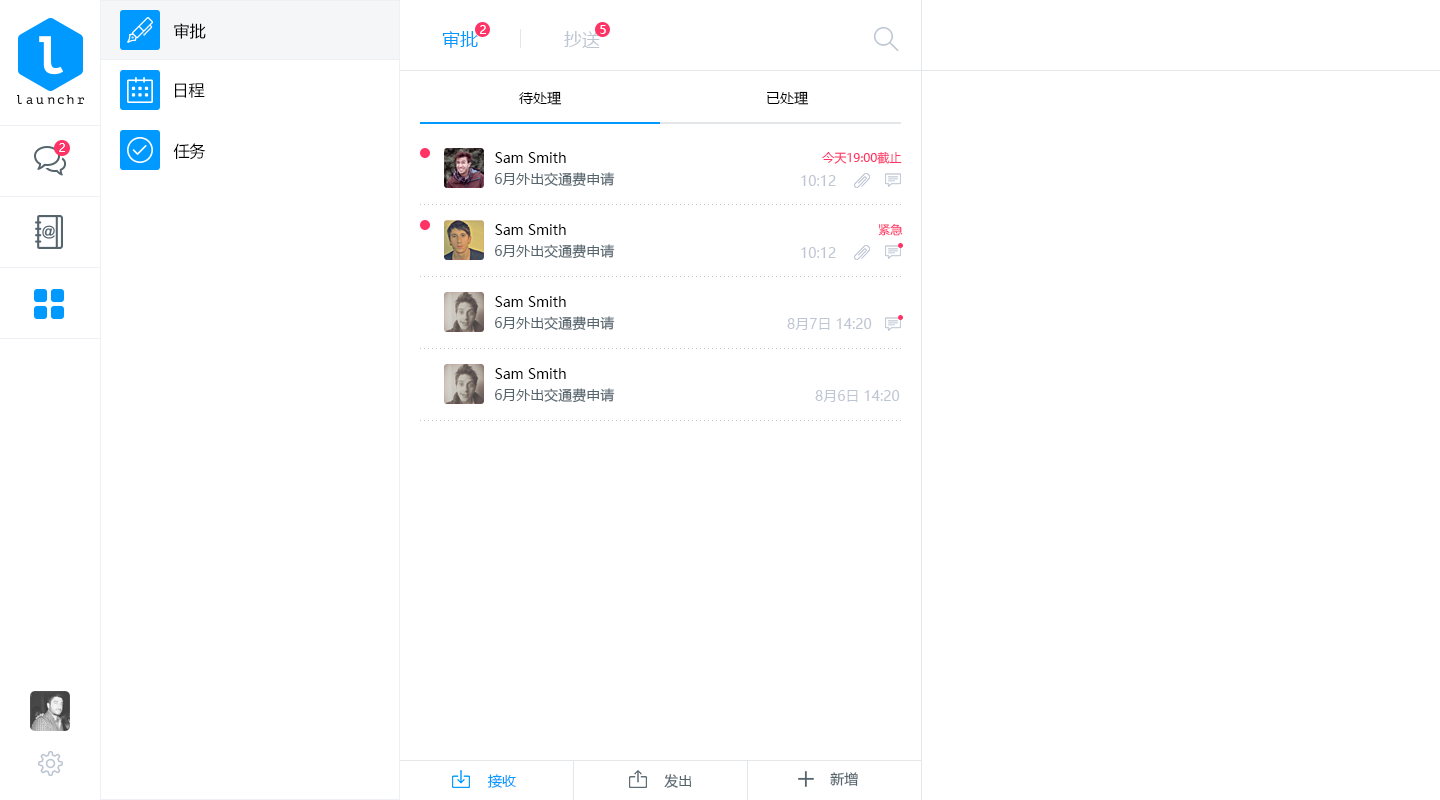
<style>
.page{position:relative;width:1440px;height:800px;background:#ffffff}
.page>*{position:absolute;margin:0}
.t1{font:16px "MicrosoftYaHei";color:#000000}
.t2{font:12px "MicrosoftYaHei";color:#ffffff}
.t3{font:18px "MicrosoftYaHei";color:#0099ff}
.t4{font:18px "MicrosoftYaHei";color:#bec6d3}
.t5{font:14px "MicrosoftYaHei";color:#000000}
.t6{font:12px "MicrosoftYaHei";letter-spacing:0.1em;color:#ffffff}
.t7{font:12px "MicrosoftYaHei";color:#ff3366}
.t8{font:14px "MicrosoftYaHei";color:#56646d}
.t9{font:14px "MicrosoftYaHei";color:#bec6d3}
.t10{font:14px "MicrosoftYaHei";color:#0099ff}
</style>
<div class="page">
<p class="t1" style="left:174px;top:23px;width:32px;height:16px">审批</p>
<p class="t2" style="left:480px;top:25px;width:6px;height:9px">2</p>
<p class="t2" style="left:600px;top:25px;width:6px;height:9px">5</p>
<p class="t3" style="left:442px;top:31px;width:36px;height:17px">审批</p>
<p class="t4" style="left:564px;top:31px;width:36px;height:17px">抄送</p>
<p class="t1" style="left:175px;top:83px;width:30px;height:15px">日程</p>
<p class="t5" style="left:519px;top:91px;width:43px;height:14px">待处理</p>
<p class="t5" style="left:767px;top:91px;width:42px;height:14px">已处理</p>
<p class="t6" style="left:59px;top:143px;width:6px;height:9px">2</p>
<p class="t1" style="left:173px;top:143px;width:33px;height:17px">任务</p>
<p class="t5" style="left:495px;top:152px;width:71px;height:11px">Sam Smith</p>
<p class="t7" style="left:822px;top:151px;width:80px;height:13px">今天19:00截止</p>
<p class="t8" style="left:495px;top:172px;width:120px;height:15px">6月外出交通费申请</p>
<p class="t9" style="left:801px;top:175px;width:35px;height:11px">10:12</p>
<p class="t5" style="left:495px;top:224px;width:71px;height:11px">Sam Smith</p>
<p class="t7" style="left:878px;top:223px;width:25px;height:13px">紧急</p>
<p class="t8" style="left:495px;top:244px;width:120px;height:15px">6月外出交通费申请</p>
<p class="t9" style="left:801px;top:247px;width:35px;height:11px">10:12</p>
<p class="t5" style="left:495px;top:296px;width:71px;height:11px">Sam Smith</p>
<p class="t8" style="left:495px;top:316px;width:120px;height:15px">6月外出交通费申请</p>
<p class="t9" style="left:787px;top:318px;width:85px;height:12px">8月7日 14:20</p>
<p class="t5" style="left:495px;top:368px;width:71px;height:11px">Sam Smith</p>
<p class="t8" style="left:495px;top:388px;width:120px;height:15px">6月外出交通费申请</p>
<p class="t9" style="left:815px;top:390px;width:85px;height:12px">8月6日 14:20</p>
<p class="t10" style="left:487px;top:774px;width:29px;height:14px">接收</p>
<p class="t8" style="left:664px;top:774px;width:27px;height:14px">发出</p>
<p class="t8" style="left:830px;top:772px;width:28px;height:14px">新增</p>
</div>
